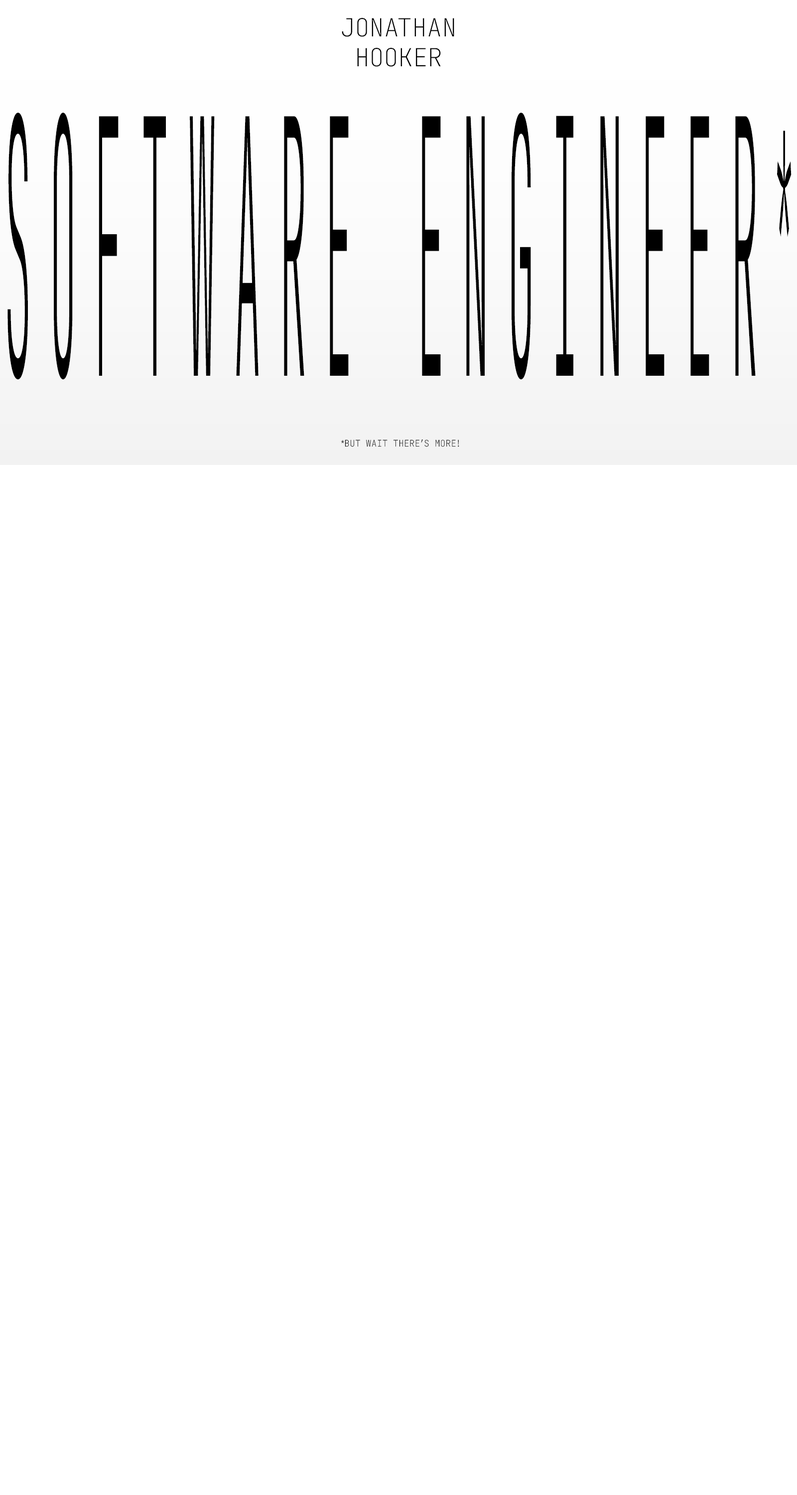
<style>
.page{position:relative;width:797px;height:1495px;background:#ffffff}
.page>*{position:absolute;margin:0}
.t1{font:24.9px "JetBrainsMono-Thin";color:#000000;text-transform:uppercase}
.t2{font:355.5px "JetBrainsMono-ExtraLight";letter-spacing:0.4em;color:#000000;text-transform:uppercase;scale:0.13 1}
.t3{font:9px "JetBrainsMono-Thin";color:#000000;text-transform:uppercase}
</style>
<div class="page">
<p class="t1" style="left:342px;top:18px;width:113px;height:49px;text-align:center">JONATHAN<br>HOOKER</p>
<p class="t2" style="left:7px;top:113px;width:785px;height:267px">SOFTWARE ENGINEER*</p>
<p class="t3" style="left:341px;top:439px;width:119px;height:8px">*but wait there’s more!</p>
</div>
